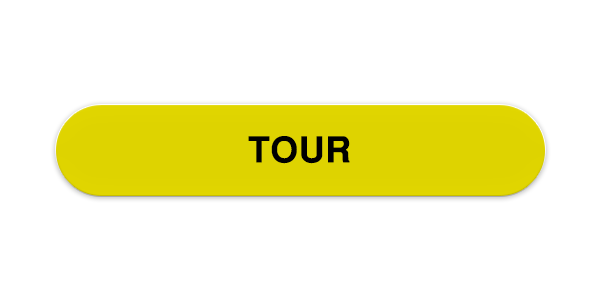
<style>
.page{position:relative;width:600px;height:300px;background:#ffffff}
.page>*{position:absolute;margin:0}
.t1{font:35.3px "SansSerifBold";color:#000000;font-weight:bold}
</style>
<div class="page">
<p class="t1" style="left:248px;top:136px;width:102px;height:28px">TOUR</p>
</div>
